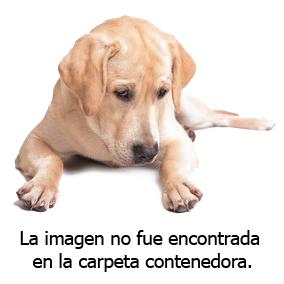
<style>
.page{position:relative;width:284px;height:284px;background:#ffffff}
.page>*{position:absolute;margin:0}
.t1{font:18.6px "Tahoma";color:#000000}
</style>
<div class="page">
<p class="t1" style="left:20px;top:230px;width:240px;height:42px;text-align:center">La imagen no fue encontrada <br>en la carpeta contenedora.</p>
</div>
